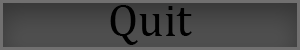
<style>
.page{position:relative;width:300px;height:50px}
.page>*{position:absolute;margin:0}
.t1{font:45.8px "CambriaMath";color:#000000}
</style>
<div class="page">
<p class="t1" style="left:110px;top:5px;width:82px;height:40px">Quit</p>
</div>
